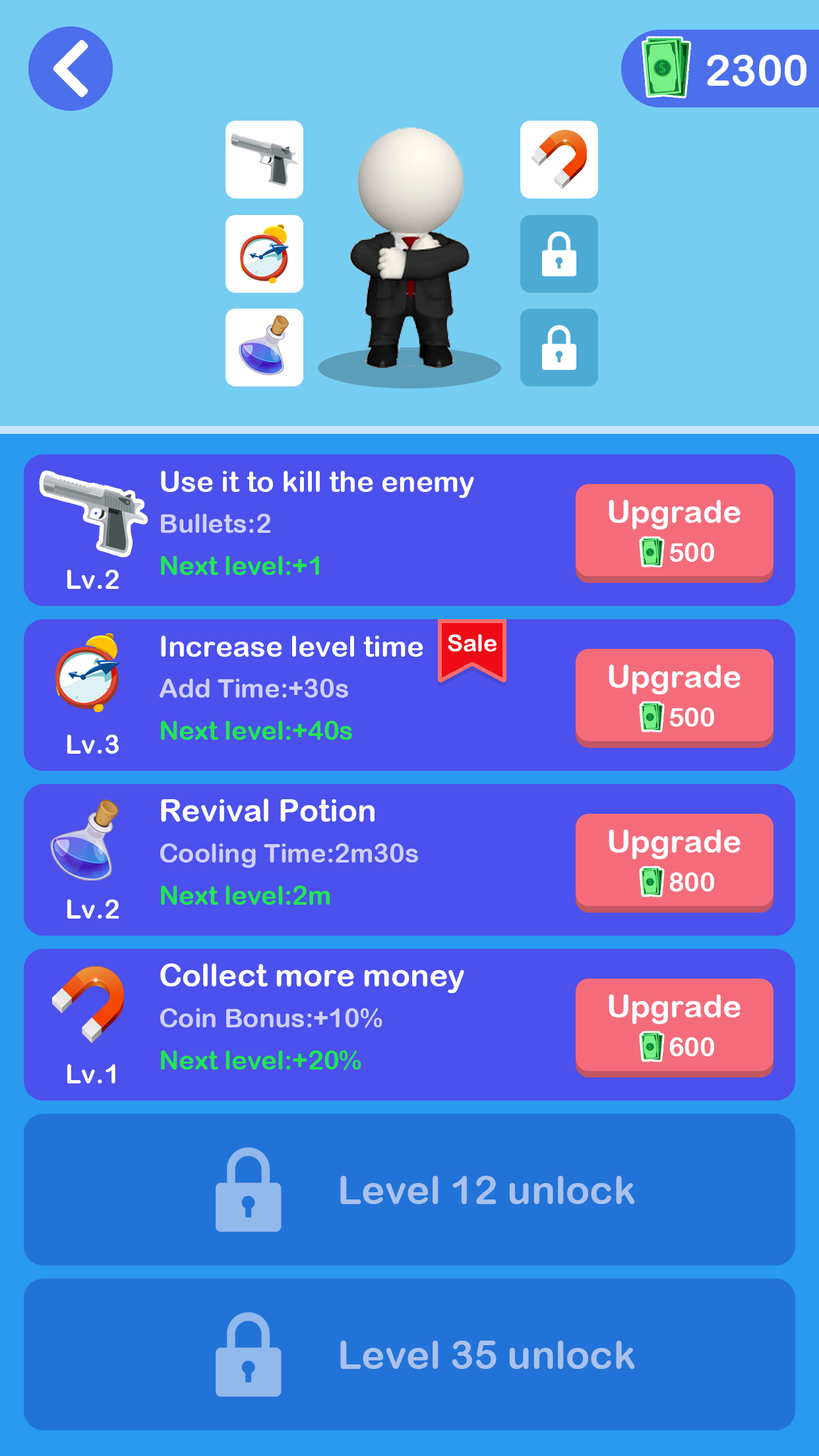
<style>
.page{position:relative;width:819px;height:1456px;background:#4c50ec}
.page>*{position:absolute;margin:0}
.t1{font:43.5px "ArialRoundedMTBold";color:#ffffff}
.t2{font:29px "ArialRoundedMTBold";color:#ffffff}
.t3{font:31.7px "ArialRoundedMTBold";color:#ffffff}
.t4{font:26.4px "ArialRoundedMTBold";color:#cfd0ff}
.t5{font:26.4px "ArialRoundedMTBold";color:#ffffff}
.t6{font:26.4px "ArialRoundedMTBold";color:#21e74f}
.t7{font:29px "ArialRoundedMTBold";color:#fefefe}
.t8{font:23.7px "ArialRoundedMTBold";color:#ffffff}
.t9{font:39.6px "ArialRoundedMTBold";color:#a9c1ec}
</style>
<div class="page">
<p class="t1" style="left:707px;top:55px;width:100px;height:31px">2300</p>
<p class="t2" style="left:161px;top:471px;width:313px;height:27px">Use it to kill the enemy</p>
<p class="t3" style="left:609px;top:500px;width:132px;height:30px">Upgrade</p>
<p class="t4" style="left:161px;top:514px;width:110px;height:19px">Bullets:2</p>
<p class="t5" style="left:670px;top:543px;width:44px;height:19px">500</p>
<p class="t6" style="left:161px;top:556px;width:158px;height:19px">Next level:+1</p>
<p class="t5" style="left:67px;top:570px;width:52px;height:19px">Lv.2</p>
<p class="t7" style="left:161px;top:636px;width:262px;height:21px">Increase level time</p>
<p class="t8" style="left:448px;top:634px;width:49px;height:17px">Sale</p>
<p class="t3" style="left:609px;top:665px;width:132px;height:29px">Upgrade</p>
<p class="t4" style="left:160px;top:679px;width:188px;height:19px">Add Time:+30s</p>
<p class="t5" style="left:670px;top:708px;width:44px;height:19px">500</p>
<p class="t6" style="left:161px;top:721px;width:191px;height:19px">Next level:+40s</p>
<p class="t5" style="left:67px;top:735px;width:52px;height:19px">Lv.3</p>
<p class="t3" style="left:161px;top:799px;width:214px;height:23px">Revival Potion</p>
<p class="t3" style="left:609px;top:830px;width:132px;height:29px">Upgrade</p>
<p class="t4" style="left:160px;top:843px;width:258px;height:25px">Cooling Time:2m30s</p>
<p class="t5" style="left:669px;top:872px;width:45px;height:20px">800</p>
<p class="t6" style="left:161px;top:886px;width:169px;height:19px">Next level:2m</p>
<p class="t5" style="left:67px;top:899px;width:52px;height:20px">Lv.2</p>
<p class="t3" style="left:160px;top:963px;width:304px;height:30px">Collect more money</p>
<p class="t3" style="left:609px;top:994px;width:132px;height:30px">Upgrade</p>
<p class="t4" style="left:160px;top:1008px;width:222px;height:20px">Coin Bonus:+10%</p>
<p class="t5" style="left:669px;top:1037px;width:45px;height:19px">600</p>
<p class="t6" style="left:161px;top:1050px;width:200px;height:20px">Next level:+20%</p>
<p class="t5" style="left:67px;top:1064px;width:48px;height:19px">Lv.1</p>
<p class="t9" style="left:340px;top:1176px;width:295px;height:28px">Level 12 unlock</p>
<p class="t9" style="left:340px;top:1341px;width:295px;height:28px">Level 35 unlock</p>
</div>
